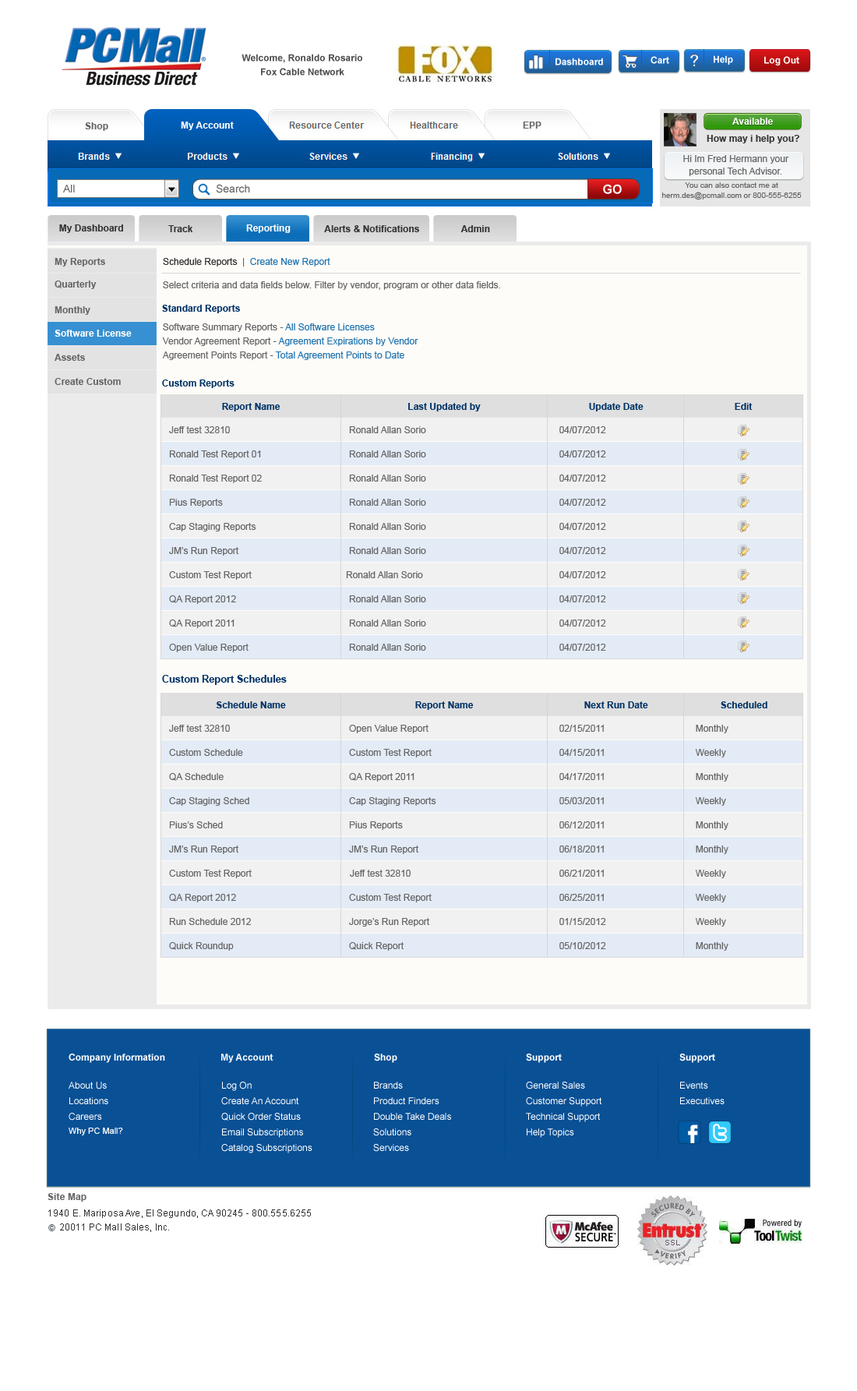
<style>
.page{position:relative;width:857px;height:1391px;background:#ffffff}
.page>*{position:absolute;margin:0}
.t1{font:9.4px/14px "Arial-BoldMT";color:#4e4e4e}
.t2{font:9.4px "Arial-BoldMT";color:#feffff}
.t3{font:9.4px "Arial-BoldMT";color:#fffefe}
.t4{font:9.4px "Arial-BoldMT";color:#333333}
.t5{font:9.4px/12.5px "ArialMT";color:#666666}
.t6{font:10.9px "ArialMT";color:#625f5f}
.t7{font:12.5px "Arial-BoldMT";color:#ffffff}
.t8{font:7.8px/10.1px "ArialMT";color:#666666}
.t9{font:9.4px "Arial-BoldMT";color:#ffffff}
.t10{font:9.4px "ArialMT";color:#2275b1}
.t11{font:9.4px "ArialMT";color:#333333}
.t12{font:9.4px "ArialMT";color:#666666}
.t13{font:9.4px "Arial-BoldMT";color:#003366}
.t14{font:9.4px/14px "ArialMT";color:#2275b1}
.t15{font:9.4px/14px "ArialMT";color:#666666}
.t16{font:10px "Arial-BoldMT";color:#003366}
.t17{font:9.4px/15.6px "ArialMT";color:#ffffff}
.t18{font:8.6px "ArialMT";color:#ffffff}
.t19{font:9.4px "Arial-BoldMT";letter-spacing:0.01em;color:#666666}
.t20{font:9.4px "ArialMT";letter-spacing:0.01em;color:#333333}
</style>
<div class="page">
<p class="t1" style="left:242px;top:54px;width:120px;height:22px;text-align:center">Welcome, Ronaldo Rosario <br>Fox Cable Network</p>
<p class="t2" style="left:556px;top:58px;width:47px;height:7px">Dashboard</p>
<p class="t2" style="left:651px;top:56px;width:18px;height:8px">Cart</p>
<p class="t2" style="left:714px;top:55px;width:19px;height:10px">Help</p>
<p class="t2" style="left:764px;top:56px;width:36px;height:9px">Log Out</p>
<p class="t3" style="left:733px;top:118px;width:40px;height:7px">Available</p>
<p class="t4" style="left:707px;top:135px;width:93px;height:8px">How may i help you?</p>
<p class="t5" style="left:683px;top:155px;width:106px;height:21px;text-align:center">Hi Im Fred Hermann your personal Tech Advisor.</p>
<p class="t6" style="left:63px;top:185px;width:12px;height:7px">All</p>
<p class="t6" style="left:216px;top:184px;width:34px;height:9px">Search</p>
<p class="t7" style="left:603px;top:184px;width:19px;height:10px">GOv</p>
<p class="t8" style="left:662px;top:182px;width:140px;height:18px;text-align:center">You can also contact me at herm.des@pcmall.com or 800-555-6255</p>
<p class="t4" style="left:59px;top:224px;width:64px;height:9px">My Dashboard</p>
<p class="t4" style="left:168px;top:225px;width:25px;height:7px">Track</p>
<p class="t9" style="left:246px;top:224px;width:45px;height:9px">Reporting</p>
<p class="t4" style="left:324px;top:225px;width:95px;height:7px">Alerts &amp; Notifications</p>
<p class="t4" style="left:461px;top:225px;width:29px;height:7px">Admin</p>
<p class="t10" style="left:163px;top:258px;width:167px;height:9px"><span class="t11">Schedule Reports  </span><span class="t12">|  </span>Create New Report</p>
<p class="t12" style="left:163px;top:281px;width:337px;height:9px">Select criteria and data fields below. Filter by vendor, program or other data fields.</p>
<p class="t13" style="left:162px;top:305px;width:78px;height:8px">Standard Reports</p>
<p class="t14" style="left:162px;top:323px;width:256px;height:37px"><span class="t15">Software Summary Reports - </span>All Software Licenses<br><span class="t15">Vendor Agreement Report - </span>Agreement Expirations by Vendor<br><span class="t15">Agreement Points Report - </span>Total Agreement Points to Date</p>
<p class="t13" style="left:162px;top:380px;width:73px;height:8px">Custom Reports</p>
<p class="t13" style="left:222px;top:403px;width:59px;height:8px">Report Name</p>
<p class="t13" style="left:408px;top:403px;width:73px;height:8px">Last Updated by</p>
<p class="t13" style="left:589px;top:403px;width:55px;height:8px">Update Date</p>
<p class="t13" style="left:735px;top:403px;width:18px;height:7px">Edit</p>
<p class="t12" style="left:169px;top:426px;width:61px;height:7px">Jeff test 32810</p>
<p class="t12" style="left:349px;top:426px;width:77px;height:7px">Ronald Allan Sorio</p>
<p class="t12" style="left:560px;top:426px;width:46px;height:7px">04/07/2012</p>
<p class="t12" style="left:169px;top:450px;width:92px;height:9px">Ronald Test Report 01</p>
<p class="t12" style="left:349px;top:450px;width:77px;height:7px">Ronald Allan Sorio</p>
<p class="t12" style="left:560px;top:450px;width:46px;height:7px">04/07/2012</p>
<p class="t12" style="left:169px;top:475px;width:93px;height:8px">Ronald Test Report 02</p>
<p class="t12" style="left:349px;top:475px;width:77px;height:7px">Ronald Allan Sorio</p>
<p class="t12" style="left:560px;top:475px;width:46px;height:7px">04/07/2012</p>
<p class="t12" style="left:169px;top:499px;width:54px;height:8px">Pius Reports</p>
<p class="t12" style="left:349px;top:499px;width:77px;height:7px">Ronald Allan Sorio</p>
<p class="t12" style="left:560px;top:499px;width:46px;height:7px">04/07/2012</p>
<p class="t12" style="left:169px;top:523px;width:87px;height:8px">Cap Staging Reports</p>
<p class="t12" style="left:349px;top:523px;width:77px;height:7px">Ronald Allan Sorio</p>
<p class="t12" style="left:560px;top:523px;width:46px;height:7px">04/07/2012</p>
<p class="t12" style="left:169px;top:547px;width:69px;height:9px">JM’s Run Report</p>
<p class="t12" style="left:349px;top:547px;width:77px;height:7px">Ronald Allan Sorio</p>
<p class="t12" style="left:560px;top:547px;width:46px;height:7px">04/07/2012</p>
<p class="t12" style="left:169px;top:571px;width:83px;height:9px">Custom Test Report</p>
<p class="t12" style="left:346px;top:571px;width:77px;height:7px">Ronald Allan Sorio</p>
<p class="t12" style="left:560px;top:571px;width:46px;height:7px">04/07/2012</p>
<p class="t12" style="left:169px;top:595px;width:67px;height:9px">QA Report 2012</p>
<p class="t12" style="left:349px;top:595px;width:77px;height:7px">Ronald Allan Sorio</p>
<p class="t12" style="left:560px;top:595px;width:46px;height:7px">04/07/2012</p>
<p class="t12" style="left:169px;top:620px;width:66px;height:8px">QA Report 2011</p>
<p class="t12" style="left:349px;top:620px;width:77px;height:7px">Ronald Allan Sorio</p>
<p class="t12" style="left:560px;top:620px;width:46px;height:7px">04/07/2012</p>
<p class="t12" style="left:169px;top:644px;width:80px;height:8px">Open Value Report</p>
<p class="t12" style="left:349px;top:644px;width:77px;height:7px">Ronald Allan Sorio</p>
<p class="t12" style="left:560px;top:644px;width:46px;height:7px">04/07/2012</p>
<p class="t16" style="left:162px;top:675px;width:125px;height:10px">Custom Report Schedules</p>
<p class="t13" style="left:216px;top:701px;width:70px;height:7px">Schedule Name</p>
<p class="t13" style="left:415px;top:701px;width:59px;height:9px">Report Name</p>
<p class="t13" style="left:584px;top:701px;width:64px;height:7px">Next Run Date</p>
<p class="t13" style="left:721px;top:701px;width:47px;height:7px">Scheduled</p>
<p class="t12" style="left:169px;top:725px;width:61px;height:7px">Jeff test 32810</p>
<p class="t12" style="left:349px;top:725px;width:80px;height:8px">Open Value Report</p>
<p class="t12" style="left:560px;top:725px;width:44px;height:7px">02/15/2011</p>
<p class="t12" style="left:696px;top:725px;width:33px;height:8px">Monthly</p>
<p class="t12" style="left:169px;top:749px;width:74px;height:7px">Custom Schedule</p>
<p class="t12" style="left:349px;top:749px;width:83px;height:8px">Custom Test Report</p>
<p class="t12" style="left:560px;top:749px;width:44px;height:7px">04/15/2011</p>
<p class="t12" style="left:695px;top:749px;width:31px;height:8px">Weekly</p>
<p class="t12" style="left:169px;top:773px;width:55px;height:8px">QA Schedule</p>
<p class="t12" style="left:349px;top:773px;width:66px;height:9px">QA Report 2011</p>
<p class="t12" style="left:560px;top:773px;width:44px;height:7px">04/17/2011</p>
<p class="t12" style="left:696px;top:773px;width:33px;height:9px">Monthly</p>
<p class="t12" style="left:169px;top:797px;width:80px;height:9px">Cap Staging Sched</p>
<p class="t12" style="left:349px;top:797px;width:87px;height:9px">Cap Staging Reports</p>
<p class="t12" style="left:560px;top:797px;width:44px;height:7px">05/03/2011</p>
<p class="t12" style="left:695px;top:797px;width:31px;height:9px">Weekly</p>
<p class="t12" style="left:169px;top:821px;width:54px;height:7px">Pius’s Sched</p>
<p class="t12" style="left:349px;top:821px;width:54px;height:9px">Pius Reports</p>
<p class="t12" style="left:560px;top:821px;width:44px;height:7px">06/12/2011</p>
<p class="t12" style="left:696px;top:821px;width:33px;height:9px">Monthly</p>
<p class="t12" style="left:169px;top:846px;width:69px;height:8px">JM’s Run Report</p>
<p class="t12" style="left:349px;top:846px;width:69px;height:8px">JM’s Run Report</p>
<p class="t12" style="left:560px;top:846px;width:44px;height:7px">06/18/2011</p>
<p class="t12" style="left:696px;top:846px;width:33px;height:8px">Monthly</p>
<p class="t12" style="left:169px;top:870px;width:83px;height:8px">Custom Test Report</p>
<p class="t12" style="left:350px;top:870px;width:61px;height:7px">Jeff test 32810</p>
<p class="t12" style="left:560px;top:870px;width:44px;height:7px">06/21/2011</p>
<p class="t12" style="left:695px;top:870px;width:31px;height:8px">Weekly</p>
<p class="t12" style="left:169px;top:894px;width:67px;height:8px">QA Report 2012</p>
<p class="t12" style="left:349px;top:894px;width:83px;height:8px">Custom Test Report</p>
<p class="t12" style="left:560px;top:894px;width:44px;height:7px">06/25/2011</p>
<p class="t12" style="left:695px;top:894px;width:31px;height:8px">Weekly</p>
<p class="t12" style="left:169px;top:918px;width:82px;height:7px">Run Schedule 2012</p>
<p class="t12" style="left:349px;top:918px;width:80px;height:9px">Jorge’s Run Report</p>
<p class="t12" style="left:560px;top:918px;width:46px;height:7px">01/15/2012</p>
<p class="t12" style="left:695px;top:918px;width:31px;height:9px">Weekly</p>
<p class="t12" style="left:169px;top:942px;width:65px;height:9px">Quick Roundup</p>
<p class="t12" style="left:349px;top:942px;width:55px;height:9px">Quick Report</p>
<p class="t12" style="left:560px;top:942px;width:46px;height:7px">05/10/2012</p>
<p class="t12" style="left:696px;top:942px;width:33px;height:9px">Monthly</p>
<p class="t9" style="left:69px;top:1054px;width:96px;height:9px">Company Information</p>
<p class="t9" style="left:221px;top:1054px;width:53px;height:9px">My Account</p>
<p class="t9" style="left:374px;top:1054px;width:23px;height:9px">Shop</p>
<p class="t9" style="left:526px;top:1054px;width:36px;height:9px">Support</p>
<p class="t9" style="left:680px;top:1054px;width:35px;height:9px">Support</p>
<p class="t17" style="left:69px;top:1082px;width:39px;height:39px">About Us<br>Locations<br>Careers</p>
<p class="t17" style="left:221px;top:1082px;width:91px;height:71px">Log On<br>Create An Account<br>Quick Order Status<br>Email Subscriptions<br>Catalog Subscriptions</p>
<p class="t17" style="left:373px;top:1082px;width:78px;height:70px">Brands<br>Product Finders<br>Double Take Deals<br>Solutions<br>Services</p>
<p class="t17" style="left:526px;top:1082px;width:76px;height:56px">General Sales<br>Customer Support<br>Technical Support<br>Help Topics</p>
<p class="t17" style="left:680px;top:1082px;width:45px;height:22px">Events<br>Executives</p>
<p class="t18" style="left:69px;top:1128px;width:54px;height:7px">Why PC Mall?</p>
<p class="t19" style="left:48px;top:1193px;width:39px;height:9px">Site Map</p>
<p class="t20" style="left:48px;top:1209px;width:263px;height:9px">1940 E. Mariposa Ave, El Segundo, CA 90245 - 800.555.6255</p>
<p class="t20" style="left:60px;top:1223px;width:109px;height:9px">20011 PC Mall Sales, Inc.</p>
</div>
